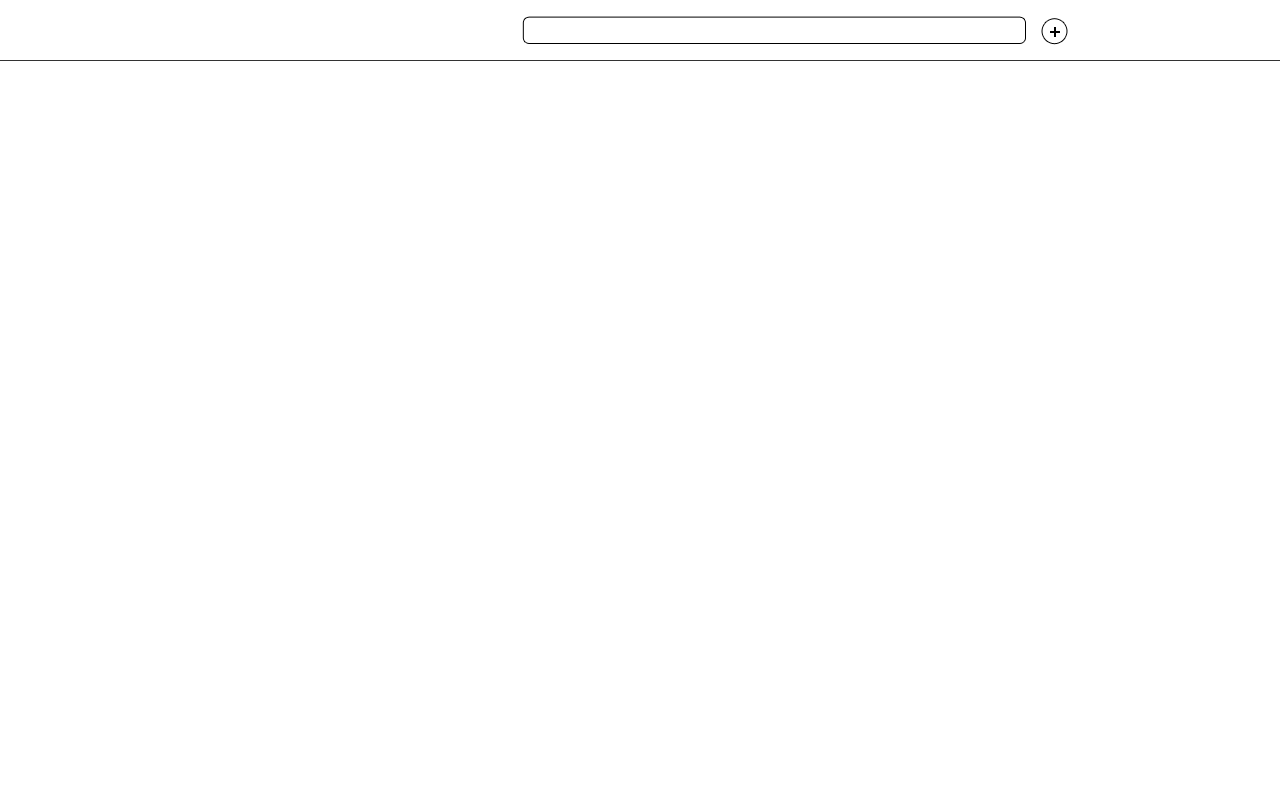
<style>
.page{position:relative;width:1280px;height:800px;background:#ffffff}
.page>*{position:absolute;margin:0}
.t1{font:18px "MyriadPro-Regular";color:#000000}
</style>
<div class="page">
<p class="t1" style="left:1050px;top:27px;width:10px;height:10px">+</p>
</div>
